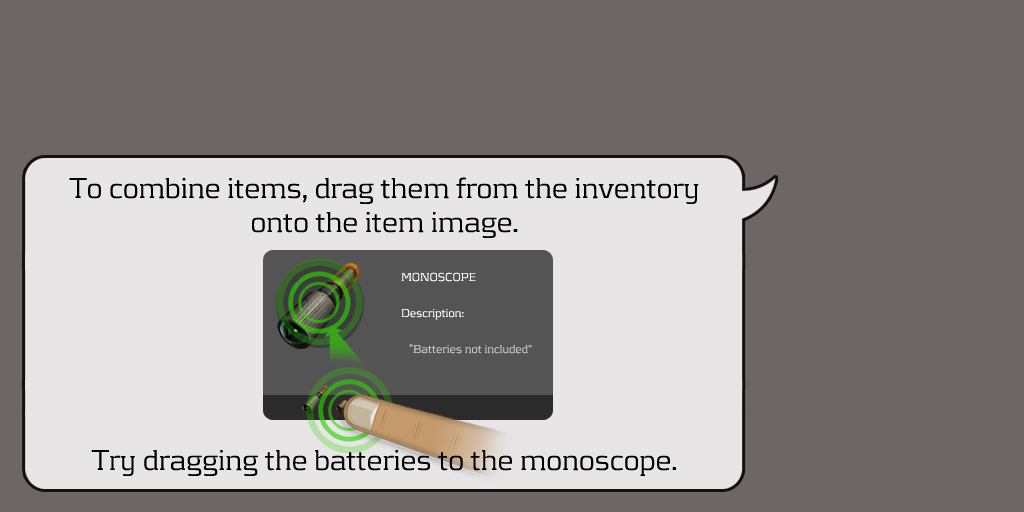
<style>
.page{position:relative;width:1024px;height:512px;background:#6e6665}
.page>*{position:absolute;margin:0}
.t1{font:30px/34px "KontrapunktLight";color:#000000}
.t2{font:12px/36px "KontrapunktLight";color:#c9c9c9}
.t3{font:12px/36px "KontrapunktLight";color:#ffffff}
</style>
<div class="page">
<p class="t1" style="left:69px;top:177px;width:630px;height:299px;text-align:center">To combine items, drag them from the inventory onto the item image. <br><br><br><br><br><br><br>Try dragging the batteries to the monoscope.</p>
<p class="t2" style="left:401px;top:272px;width:131px;height:82px"><span class="t3">MONOSCOPE<br>Description:<br></span>   “Batteries not included”</p>
</div>
